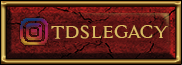
<style>
.page{position:relative;width:182px;height:65px}
.page>*{position:absolute;margin:0}
.t1{font:19px "Assassin$";letter-spacing:-0.005em;color:#daba62;text-transform:uppercase}
</style>
<div class="page">
<p class="t1" style="left:51px;top:25px;width:117px;height:14px">TDSLegacy</p>
</div>
